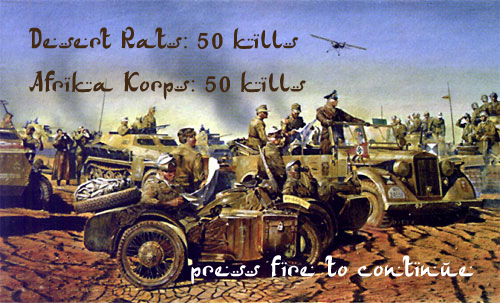
<style>
.page{position:relative;width:500px;height:303px}
.page>*{position:absolute;margin:0}
.t1{font:30px "ArabDancesMediumItalic";color:#422913}
.t2{font:36px "ArabDancesMediumItalic";color:#422913}
.t3{font:30px "ArabDancesMediumItalic";color:#ffffff}
</style>
<div class="page">
<p class="t1" style="left:29px;top:26px;width:277px;height:74px">Desert Rats: <span class="t2">50</span> kills<br>Afrika Korps: <span class="t2">50</span> kills</p>
<p class="t3" style="left:191px;top:255px;width:283px;height:30px">press fire to continue</p>
</div>
